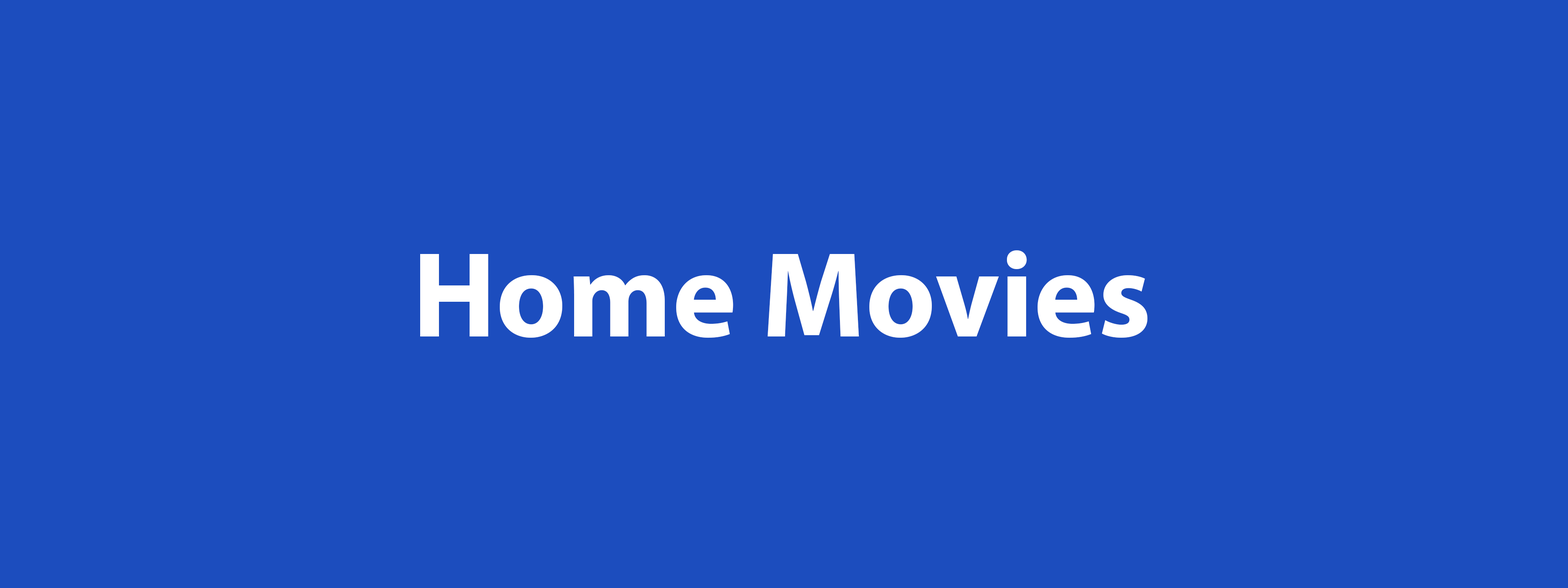
<style>
.page{position:relative;width:1568px;height:588px;background:#1c4dbe}
.page>*{position:absolute;margin:0}
.t1{font:122.5px "MyriadPro-Bold";color:#ffffff}
</style>
<div class="page">
<p class="t1" style="left:420px;top:250px;width:727px;height:88px">Home Movies</p>
</div>
